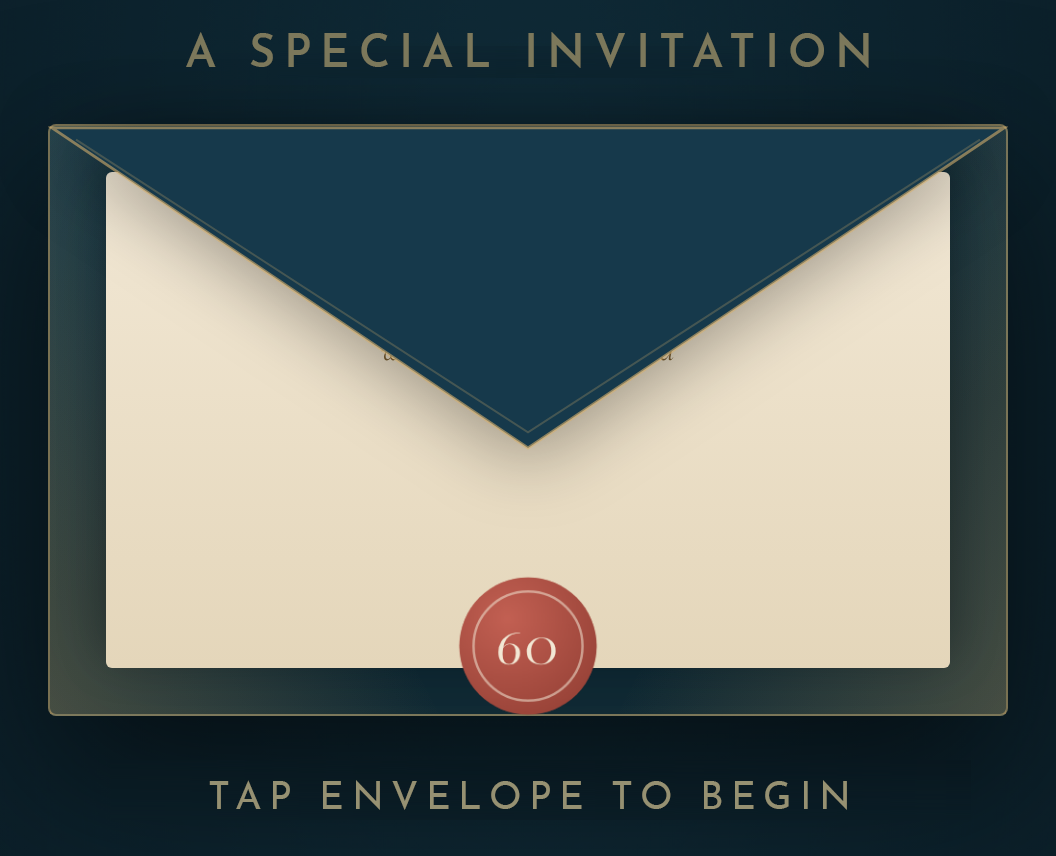
<style>
.page{position:relative;width:1056px;height:856px}
.page>*{position:absolute;margin:0}
.t1{font:45px "JosefinSans-SemiBold";letter-spacing:0.2em;color:#7c785b}
.t2{font:38px "JosefinSans-Regular";letter-spacing:0.2em;color:#969172}
</style>
<div class="page">
<p class="t1" style="left:186px;top:32px;width:683px;height:37px">A SPECIAL INVITATION</p>
<p class="t2" style="left:209px;top:780px;width:638px;height:30px">TAP ENVELOPE TO BEGIN</p>
</div>
